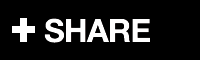
<style>
.page{position:relative;width:200px;height:60px;background:#000000}
.page>*{position:absolute;margin:0}
.t1{font:32px "HelveticaNeue-Bold";letter-spacing:-0.025em;color:#ffffff}
</style>
<div class="page">
<p class="t1" style="left:44px;top:18px;width:106px;height:25px">SHARE</p>
<p class="t1" style="left:45px;top:18px;width:106px;height:25px">SHARE</p>
</div>
